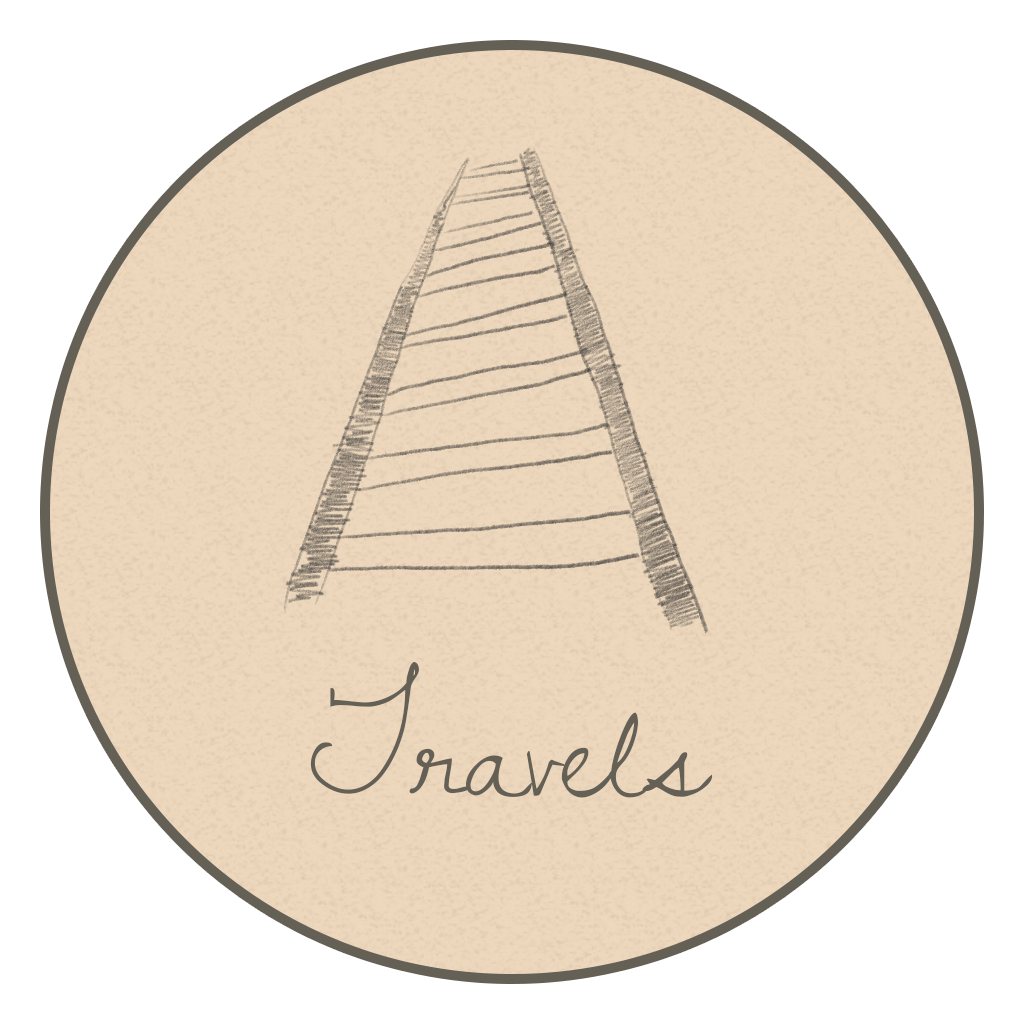
<style>
.page{position:relative;width:1024px;height:1024px;background:#ffffff}
.page>*{position:absolute;margin:0}
.t1{font:150px "DawningofaNewDay";color:#656056}
</style>
<div class="page">
<p class="t1" style="left:310px;top:661px;width:402px;height:137px">Travels</p>
</div>
